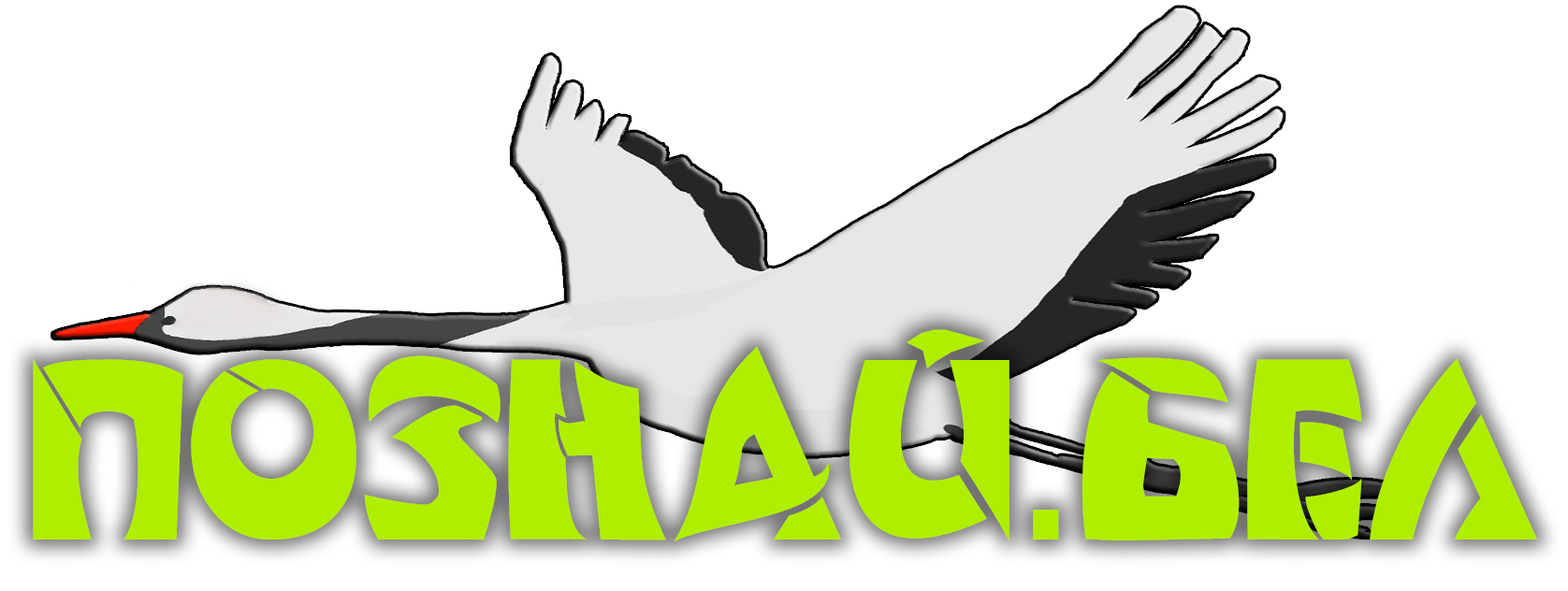
<style>
.page{position:relative;width:1568px;height:591px;background:#ffffff}
.page>*{position:absolute;margin:0}
.t1{font:214.4px "DSComedyCyrBold";color:#b0ee00}
.t2{font:214.4px "Tahoma";color:#b0ee00}
</style>
<div class="page">
<p class="t1" style="left:33px;top:329px;width:1504px;height:213px">ПОЗНАЙ<span class="t2">.</span>БЕЛ</p>
</div>
